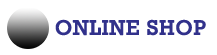
<style>
.page{position:relative;width:217px;height:55px;background:#ffffff}
.page>*{position:absolute;margin:0}
.t1{font:20.8px "Rockwell";letter-spacing:0.026em;color:#31318b;font-weight:bold}
</style>
<div class="page">
<p class="t1" style="left:55px;top:19px;width:151px;height:17px">ONLINE SHOP</p>
</div>
